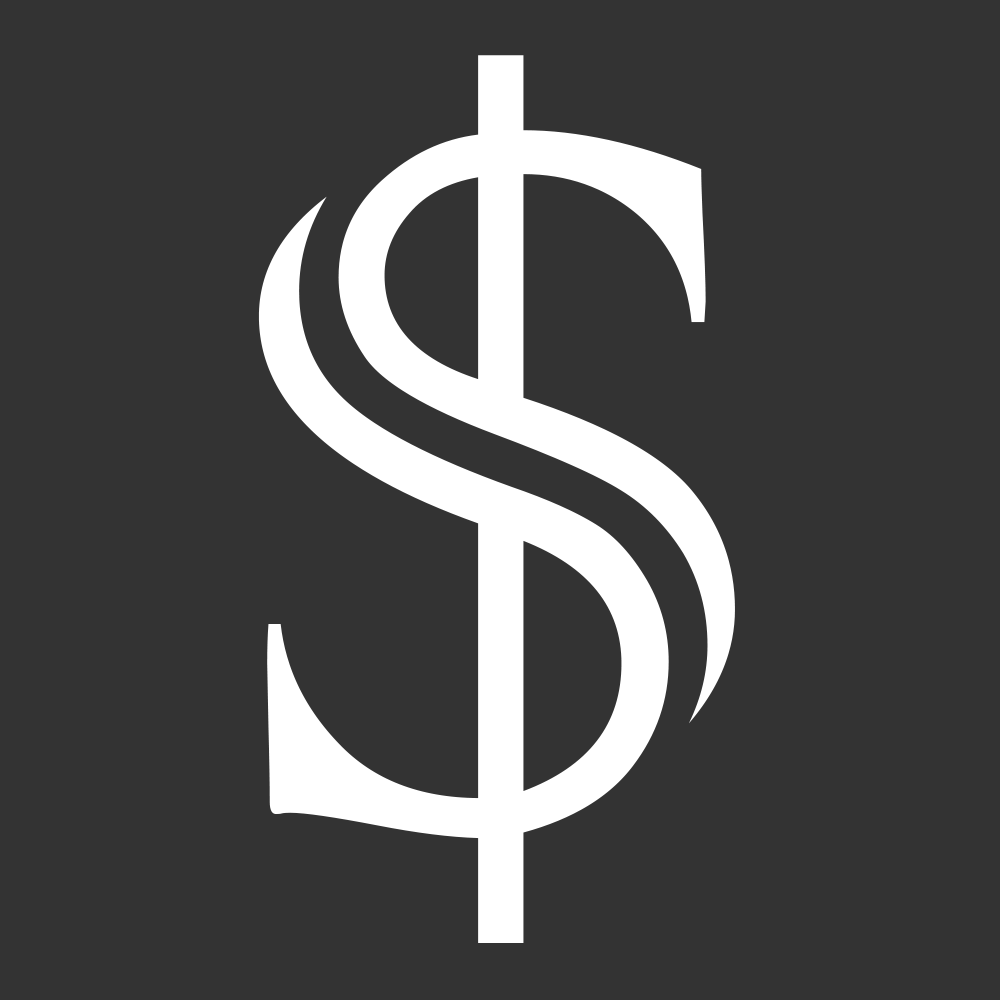
<style>
.page{position:relative;width:1000px;height:1000px;background:#333333}
.page>*{position:absolute;margin:0}
.t1{font:1300.9px "ColonnaMT";color:#ffffff}
</style>
<div class="page">
<p class="t1" style="left:258px;top:55px;width:477px;height:888px">$</p>
</div>
